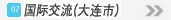
<style>
.page{position:relative;width:171px;height:20px;background:#ffffff}
.page>*{position:absolute;margin:0}
.t1{font:14px "New-Gulim";color:#3f3f3f;font-weight:bold;font-style:italic;scale:0.85 1}
</style>
<div class="page">
<p class="t1" style="left:24px;top:3px;width:95px;height:14px">国际交流(大连市)</p>
</div>
